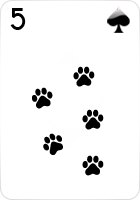
<style>
.page{position:relative;width:140px;height:200px;background:#ffffff}
.page>*{position:absolute;margin:0}
.t1{font:26px "CardCharacters";color:#000000}
</style>
<div class="page">
<p class="t1" style="left:10px;top:8px;width:16px;height:22px">5</p>
</div>
